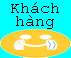
<style>
.page{position:relative;width:71px;height:58px;background:#00ffff}
.page>*{position:absolute;margin:0}
.t1{font:12px/13.3px "CourierNewPSMT";color:#000000}
</style>
<div class="page">
<p class="t1" style="left:11px;top:2px;width:48px;height:27px;text-align:center">Khách<br>hàng</p>
</div>
